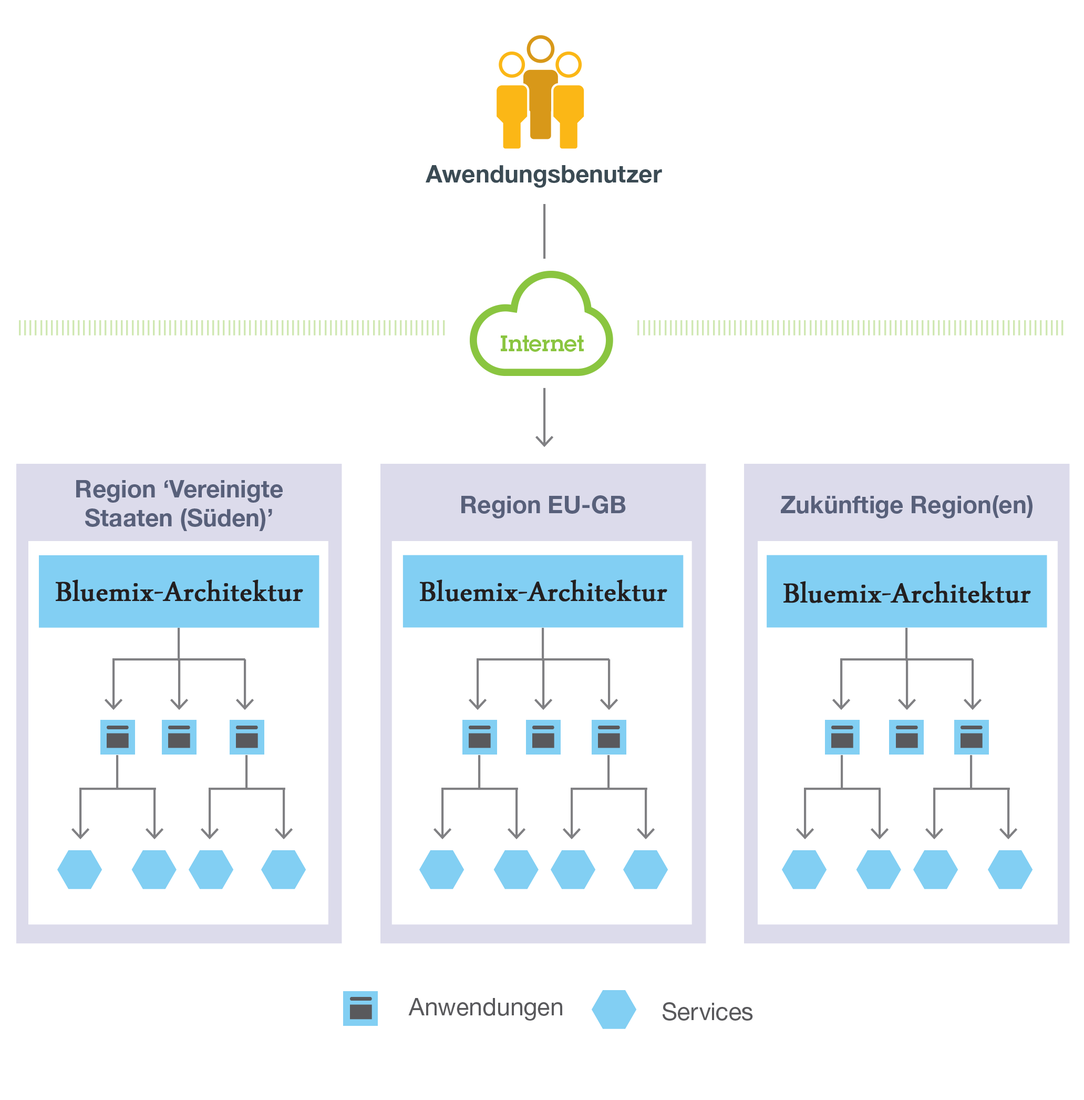
<style>
.page{position:relative;width:1084px;height:1100px;background:#ffffff}
.page>*{position:absolute;margin:0}
.t1{font:24.1px "HelveticaNeue-Bold";color:#3b4b54}
.t2{font:21.9px "LubalinDemiforIBM";color:#8ac540}
.t3{font:24.1px "HelveticaNeue-Bold";color:#58607a}
.t4{font:39.4px "DaunPenh";color:#231f20;font-weight:bold}
.t5{font:24.1px "HelveticaNeue-Roman";color:#59595c}
.t6{font:24.1px "HelvNeueRomanforIBM";color:#59595c}
</style>
<div class="page">
<p class="t1" style="left:426px;top:165px;width:236px;height:23px">Awendungsbenutzer</p>
<p class="t2" style="left:501px;top:335px;width:83px;height:17px">Internet</p>
<p class="t3" style="left:76px;top:480px;width:207px;height:51px;text-align:center">Region ‘Vereinigte <br>Staaten (Süden)’</p>
<p class="t3" style="left:462px;top:495px;width:164px;height:23px">Region EU-GB</p>
<p class="t3" style="left:781px;top:495px;width:252px;height:23px">Zukünftige Region(en)</p>
<p class="t4" style="left:56px;top:579px;width:247px;height:22px">Bluemix-Architektur</p>
<p class="t4" style="left:420px;top:579px;width:248px;height:22px">Bluemix-Architektur</p>
<p class="t4" style="left:784px;top:581px;width:247px;height:22px">Bluemix-Architektur</p>
<p class="t5" style="left:408px;top:998px;width:154px;height:22px">Anwendungen</p>
<p class="t6" style="left:663px;top:1002px;width:90px;height:18px">Services</p>
</div>
